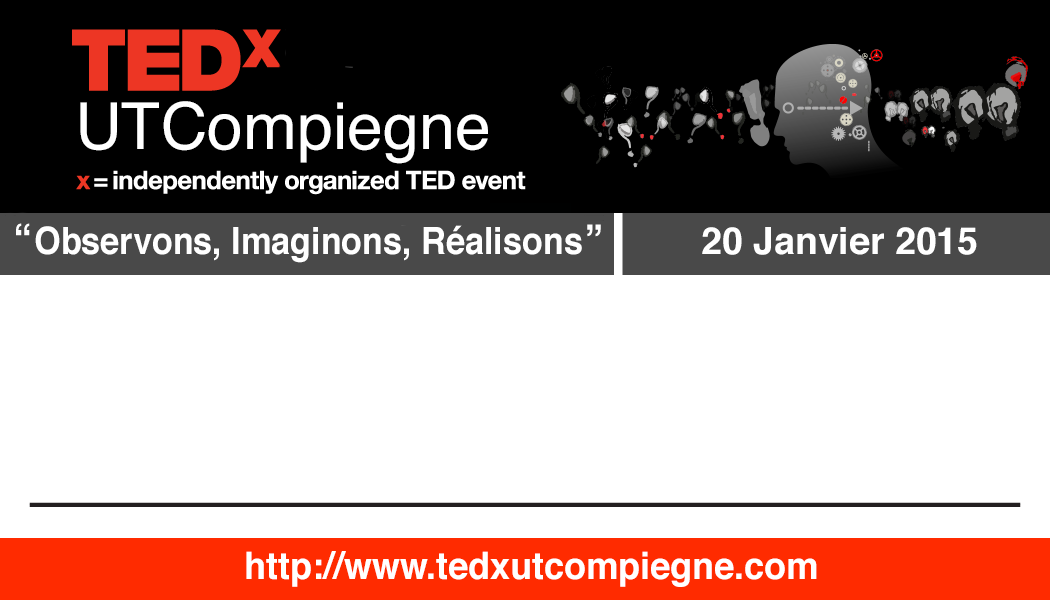
<style>
.page{position:relative;width:1050px;height:600px;background:#ffffff}
.page>*{position:absolute;margin:0}
.t1{font:64.6px "Helvetica";color:#ffffff}
.t2{font:37.5px "Helvetica-Bold";color:#ffffff;scale:0.91 1}
.t3{font:37.5px "Helvetica-Bold";color:#ffffff}
.t4{font:37.5px "Helvetica-Bold";color:#ffffff;scale:0.96 1}
</style>
<div class="page">
<p class="t1" style="left:80px;top:101px;width:408px;height:63px">UTCompiegne</p>
<p class="t2" style="left:35px;top:225px;width:547px;height:38px">Observons, Imaginons, Réalisons</p>
<p class="t3" style="left:702px;top:227px;width:275px;height:28px">20 Janvier 2015</p>
<p class="t4" style="left:246px;top:551px;width:571px;height:36px">http://www.tedxutcompiegne.com</p>
</div>
